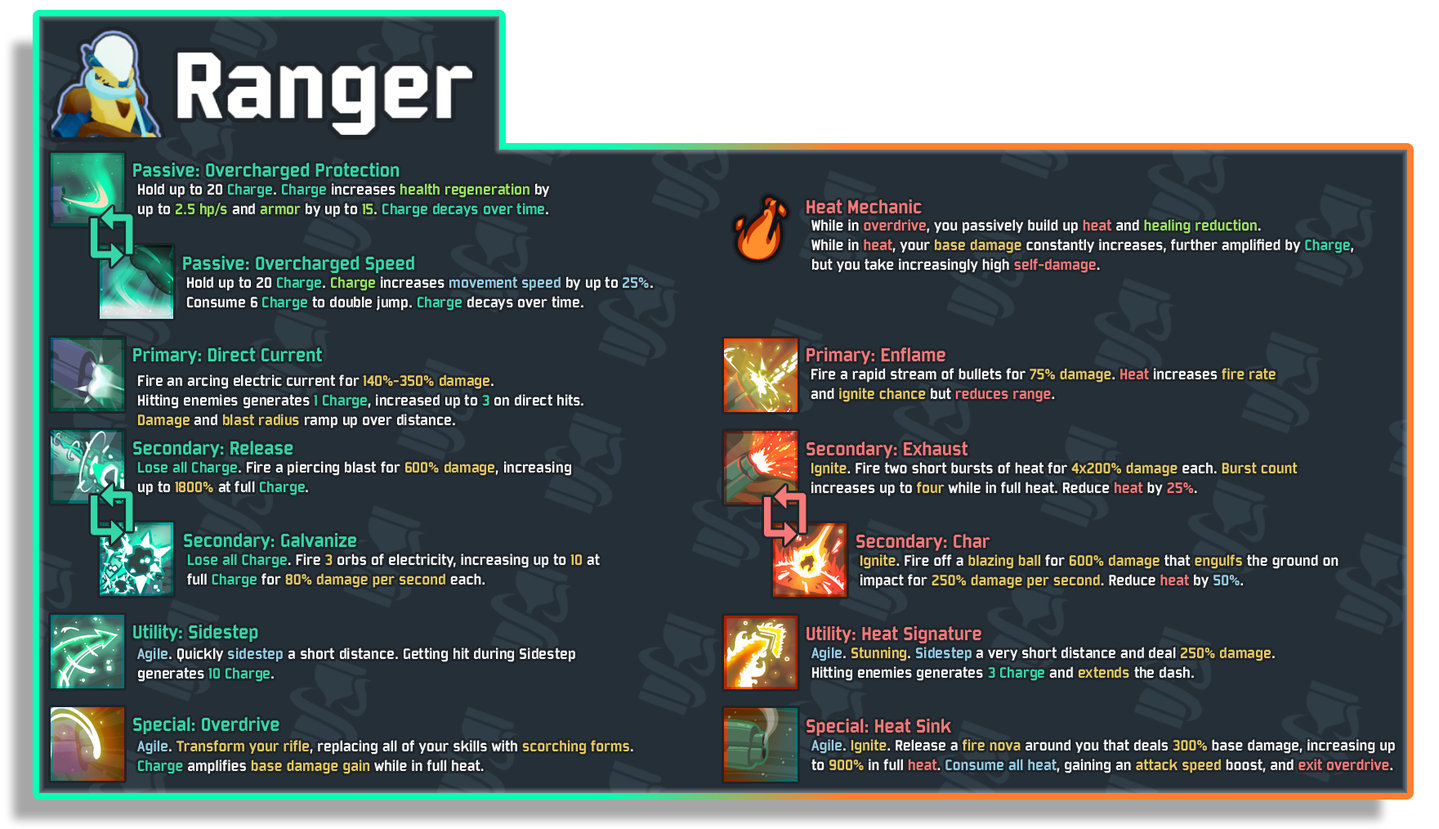
<style>
.page{position:relative;width:1439px;height:829px;background:#252f38}
.page>*{position:absolute;margin:0}
.t1{font:20.4px "Bombardier";color:#35d7a9}
.t2{font:16.3px "Bombardier";color:#35d7a9}
.t3{font:16.3px "Bombardier";color:#f7f7f7}
.t4{font:16.3px "Bombardier";color:#9ce562}
.t5{font:20.4px "Bombardier";color:#f87979}
.t6{font:16.3px "Bombardier";color:#f87979}
.t7{font:16.3px "Bombardier";color:#e5c962}
.t8{font:16.3px "Bombardier";color:#95cde5}
</style>
<div class="page">
<p class="t1" style="left:133px;top:163px;width:267px;height:17px">Passive: Overcharged Protection</p>
<p class="t2" style="left:138px;top:183px;width:412px;height:34px"><span class="t3">Hold up to 20 </span>Charge<span class="t3">. </span>Charge<span class="t3"> increases </span><span class="t4">health regeneration</span><span class="t3"> by <br>up to </span><span class="t4">2.5 hp/s</span><span class="t3"> and </span><span class="t4">armor</span><span class="t3"> by up to </span><span class="t4">15</span><span class="t3">. </span>Charge decays over time<span class="t3">.</span></p>
<p class="t5" style="left:807px;top:199px;width:115px;height:14px">Heat Mechanic</p>
<p class="t3" style="left:811px;top:219px;width:543px;height:54px">While in <span class="t6">overdrive</span>, you passively build up <span class="t6">heat</span> and <span class="t4">healing reduction</span>. <br>While in <span class="t6">heat</span>, your <span class="t7">base damage </span>constantly increases, further amplified by <span class="t2">Charge</span>, <br>but you take increasingly high <span class="t6">self-damage</span>.</p>
<p class="t1" style="left:183px;top:256px;width:231px;height:17px">Passive: Overcharged Speed</p>
<p class="t3" style="left:187px;top:276px;width:466px;height:35px">Hold up to 20 <span class="t2">Charge</span>. <span class="t4">Charge</span> increases <span class="t8">movement speed</span> by up to <span class="t8">25%</span>. <br>Consume 6 <span class="t2">Charge</span> to double jump. <span class="t2">Charge</span> decays over time.</p>
<p class="t1" style="left:133px;top:347px;width:189px;height:17px">Primary: Direct Current</p>
<p class="t5" style="left:807px;top:347px;width:138px;height:17px">Primary: Enflame</p>
<p class="t3" style="left:138px;top:374px;width:445px;height:54px">Fire an arcing electric current for <span class="t7">140%-350% damage</span>. <br>Hitting enemies generates <span class="t2">1 Charge</span>, increased up to <span class="t2">3</span> on direct hits. <br><span class="t7">Damage</span> and <span class="t7">blast radius</span> ramp up over distance.</p>
<p class="t3" style="left:811px;top:368px;width:465px;height:34px">Fire a rapid stream of bullets for <span class="t7">75% damage</span>. <span class="t6">Heat</span> increases<span class="t7"> fire rate <br></span>and <span class="t7">ignite chance </span>but <span class="t6">reduces range</span>.</p>
<p class="t1" style="left:133px;top:440px;width:160px;height:18px">Secondary: Release</p>
<p class="t5" style="left:807px;top:441px;width:161px;height:17px">Secondary: Exhaust</p>
<p class="t3" style="left:138px;top:461px;width:433px;height:34px"><span class="t2">Lose all Charge</span>. Fire a piercing blast for <span class="t7">600% damage</span>, increasing <br>up to <span class="t7">1800%</span> at full <span class="t2">Charge</span>.</p>
<p class="t3" style="left:811px;top:462px;width:487px;height:34px"><span class="t7">Ignite</span>. Fire two short bursts of heat for <span class="t7">4x200% damage</span> each. <span class="t7">Burst count <br></span>increases up to <span class="t7">four</span> while in full heat. Reduce <span class="t6">heat</span> by<span class="t6"> 25%</span>.</p>
<p class="t1" style="left:184px;top:533px;width:172px;height:17px">Secondary: Galvanize</p>
<p class="t5" style="left:856px;top:534px;width:134px;height:17px">Secondary: Char</p>
<p class="t3" style="left:187px;top:553px;width:413px;height:35px"><span class="t2">Lose all Charge</span>. Fire <span class="t7">3</span> orbs of electricity, increasing up to <span class="t7">10</span> at <br>full <span class="t2">Charge</span> for <span class="t7">80% damage per second</span> each.</p>
<p class="t3" style="left:860px;top:554px;width:479px;height:34px"><span class="t7">Ignite</span>. Fire off a <span class="t7">blazing ball</span> for <span class="t7">600% damage</span> that <span class="t7">engulfs</span> the ground on <br>impact for <span class="t7">250% damage per second</span>. Reduce <span class="t6">heat</span> by <span class="t8">50%</span>.</p>
<p class="t1" style="left:133px;top:624px;width:125px;height:17px">Utility: Sidestep</p>
<p class="t5" style="left:807px;top:626px;width:174px;height:17px">Utility: Heat Signature</p>
<p class="t3" style="left:137px;top:647px;width:438px;height:35px"><span class="t8">Agile</span>. Quickly <span class="t8">sidestep</span> a short distance. Getting hit during Sidestep <br>generates <span class="t2">10 Charge</span>.</p>
<p class="t3" style="left:811px;top:646px;width:464px;height:35px"><span class="t8">Agile</span>. <span class="t7">Stunning</span>. <span class="t8">Sidestep</span> a very short distance and deal <span class="t7">250% damage</span>. <br>Hitting enemies generates <span class="t2">3 Charge</span> and <span class="t7">extends</span> the dash.</p>
<p class="t1" style="left:133px;top:717px;width:146px;height:17px">Special: Overdrive</p>
<p class="t5" style="left:807px;top:718px;width:145px;height:17px">Special: Heat Sink</p>
<p class="t3" style="left:137px;top:740px;width:496px;height:34px"><span class="t8">Agile</span>. <span class="t7">Transform your rifle</span>, replacing all of your skills with <span class="t7">scorching forms</span>. <br><span class="t2">Charge</span> amplifies <span class="t7">base damage gain</span> while in full heat.</p>
<p class="t3" style="left:811px;top:739px;width:584px;height:34px"><span class="t8">Agile</span>. <span class="t7">Ignite</span>. Release a <span class="t7">fire nova</span> around you that deals <span class="t7">300%</span> base damage, increasing up <br>to <span class="t7">900%</span> in full <span class="t6">heat</span>. <span class="t8">Consume all heat</span>, gaining an <span class="t7">attack speed </span>boost, and <span class="t6">exit overdrive</span>.</p>
</div>
